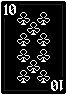
<style>
.page{position:relative;width:67px;height:95px;background:#000000}
.page>*{position:absolute;margin:0}
.t1{font:16px "Alagard";color:#ffffff}
</style>
<div class="page">
<p class="t1" style="left:4px;top:4px;width:12px;height:11px">10</p>
<p class="t1" style="left:51px;top:80px;width:12px;height:11px;rotate:180deg">10</p>
</div>
